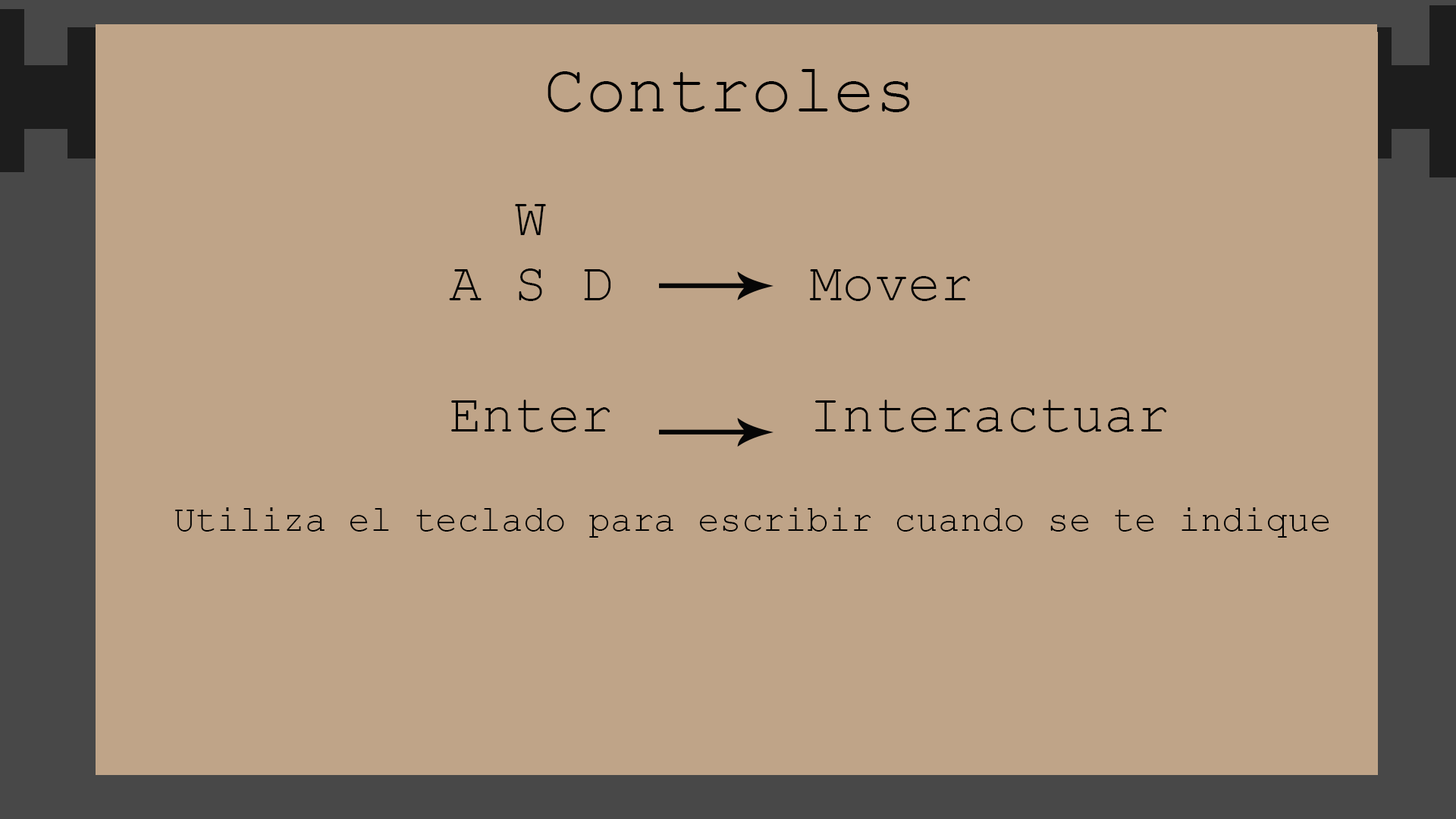
<style>
.page{position:relative;width:1456px;height:819px;background:#bfa488}
.page>*{position:absolute;margin:0}
.t1{font:69.1px "CourierNewPSMT";color:#000000}
.t2{font:54.6px "CourierNewPSMT";color:#000000}
.t3{font:36.4px "CourierNewPSMT";color:#000000}
</style>
<div class="page">
<p class="t1" style="left:548px;top:69px;width:362px;height:43px">Controles</p>
<p class="t2" style="left:449px;top:204px;width:718px;height:228px">W<br>A S D      Mover<br><br>Enter      Interactuar</p>
<p class="t3" style="left:174px;top:507px;width:1155px;height:31px"><span class="t2"><br></span>Utiliza el teclado para escribir cuando se te indique</p>
</div>
